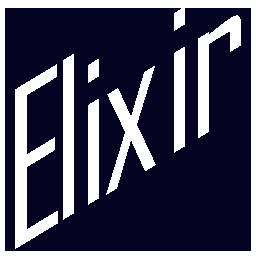
<style>
.page{position:relative;width:256px;height:256px;background:#040322}
.page>*{position:absolute;margin:0}
.t1{font:210px "AgencyFB-Reg";color:#ffffff;scale:0.96 1}
</style>
<div class="page">
<p class="t1" style="left:15px;top:7px;width:226px;height:242px;rotate:-31deg">Elixir</p>
</div>
